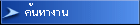
<style>
.page{position:relative;width:140px;height:25px}
.page>*{position:absolute;margin:0}
.t1{font:15.3px "EucrosiaDSE";color:#ffffff;scale:1.12 1}
</style>
<div class="page">
<p class="t1" style="left:25px;top:3px;width:43px;height:13px">¤é¹ËÒ§Ò¹</p>
</div>
